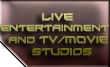
<style>
.page{position:relative;width:110px;height:67px}
.page>*{position:absolute;margin:0}
.t1{font:10px "Xirod-Regular";scale:0.96 1}
.t2{font:8.5px "Xirod-Regular";scale:0.96 1}
.t3{font:9px "Xirod-Regular";scale:0.96 1}
</style>
<div class="page">
<p class="t1" style="left:0px;top:13px;width:109px;height:43px"><span class="t2">          </span>  LIVE <br><span class="t3">ENTERTAINMENT<br>  AND</span> TV/MOVIE <br>        STUDIOS</p>
</div>
